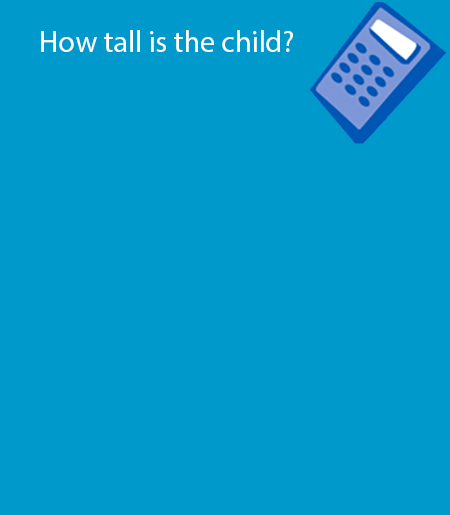
<style>
.page{position:relative;width:450px;height:515px;background:#0099cc}
.page>*{position:absolute;margin:0}
.t1{font:30px "MyriadPro-Regular";color:#ffffff}
</style>
<div class="page">
<p class="t1" style="left:41px;top:30px;width:252px;height:22px">How tall is the child?</p>
</div>
